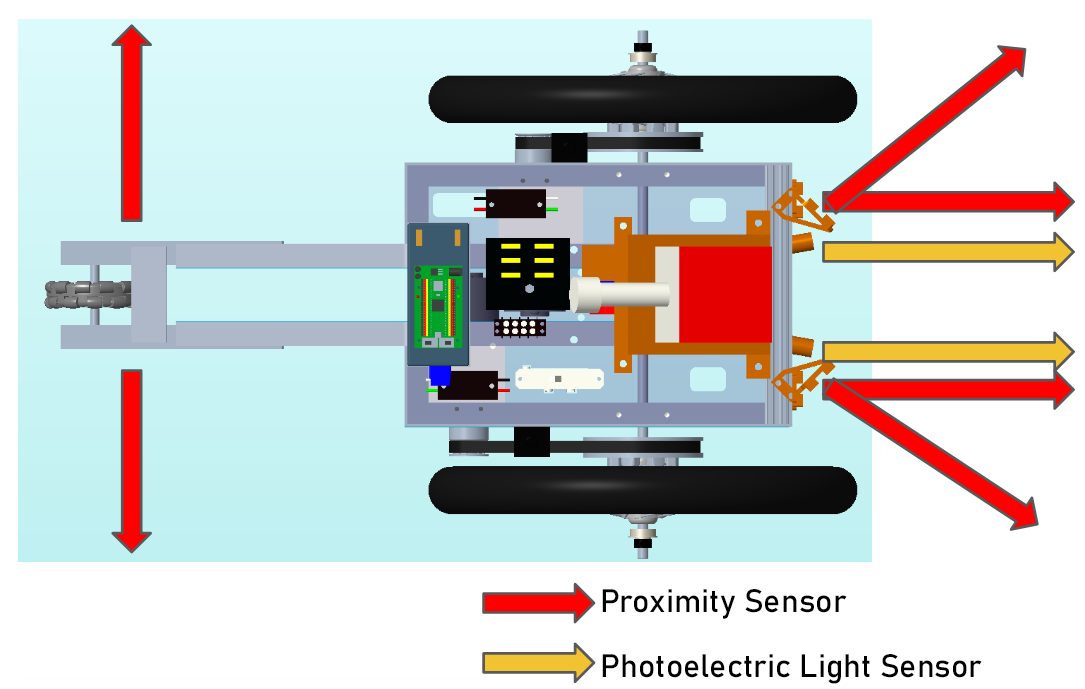
<style>
.page{position:relative;width:1085px;height:689px;background:#ffffff}
.page>*{position:absolute;margin:0}
.t1{font:12px "Bahnschrift";color:#000000}
</style>
<div class="page">
<p class="t1" style="left:602px;top:589px;width:245px;height:30px;text-align:center">Proximity Sensor</p>
<p class="t1" style="left:602px;top:654px;width:380px;height:30px;text-align:center">Photoelectric Light Sensor</p>
</div>
